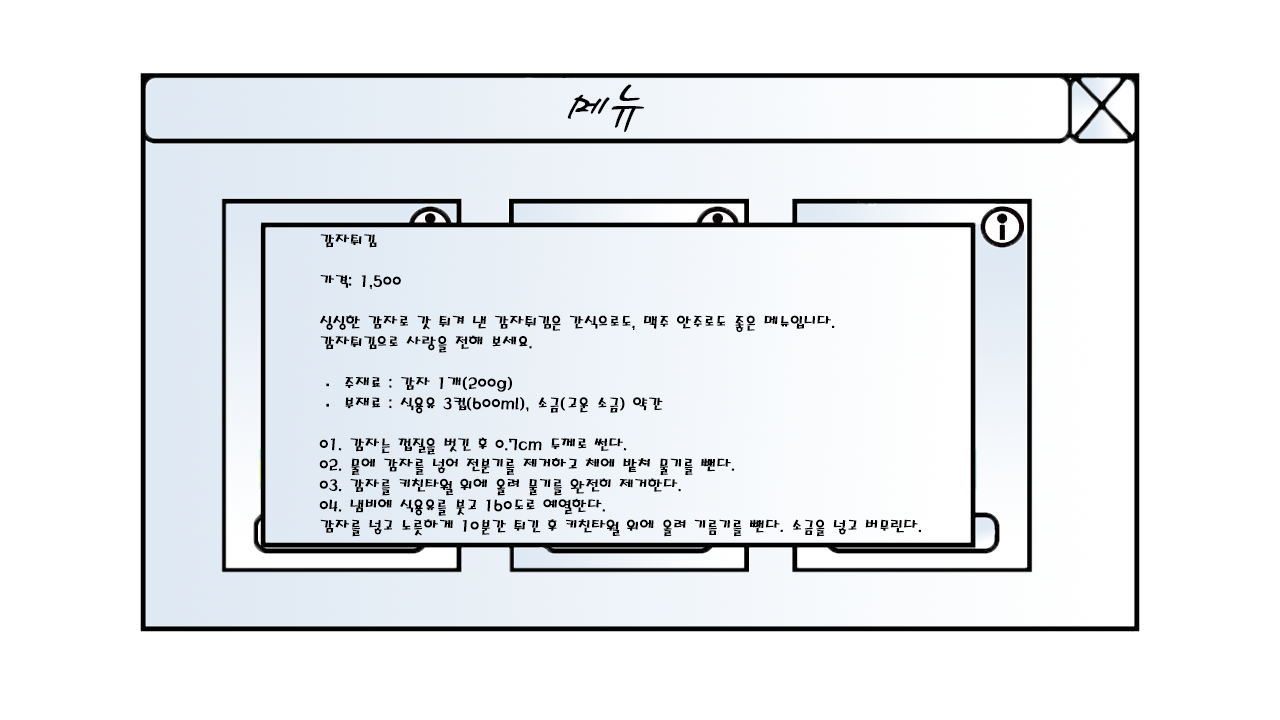
<style>
.page{position:relative;width:1280px;height:720px;background:#ffffff}
.page>*{position:absolute;margin:0}
.t1{font:60px "HaanCjaB";color:#010101}
.t2{font:17px "MagicR-HM";color:#000000}
</style>
<div class="page">
<p class="t1" style="left:567px;top:84px;width:78px;height:49px">메뉴</p>
<p class="t2" style="left:319px;top:234px;width:602px;height:303px">감자튀김<br><br>가격: 1,500<br><br>싱싱한 감자로 갓 튀겨 낸 감자튀김은 간식으로도, 맥주 안주로도 좋은 메뉴입니다. <br>감자튀김으로 사랑을 전해 보세요. <br><br>· 주재료 : 감자 1개(200g)<br>· 부재료 : 식용유 3컵(600ml), 소금(고운 소금) 약간<br><br>01. 감자는 껍질을 벗긴 후 0.7cm 두께로 썬다.<br>02. 물에 감자를 넣어 전분기를 제거하고 체에 밭쳐 물기를 뺀다.<br>03. 감자를 키친타월 위에 올려 물기를 완전히 제거한다.<br>04. 냄비에 식용유를 붓고 160도로 예열한다. <br>감자를 넣고 노릇하게 10분간 튀긴 후 키친타월 위에 올려 기름기를 뺀다. 소금을 넣고 버무린다.</p>
</div>
